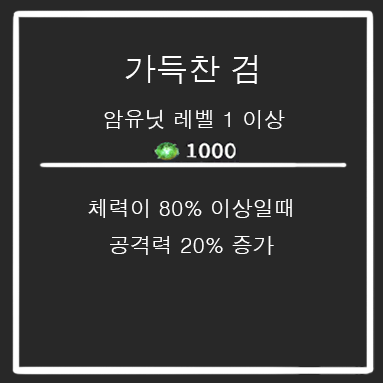
<style>
.page{position:relative;width:383px;height:383px;background:#282828}
.page>*{position:absolute;margin:0}
.t1{font:21.3px "Dotum";color:#ffffff}
.t2{font:32px "Dotum";color:#ffffff}
</style>
<div class="page">
<p class="t1" style="left:104px;top:55px;width:181px;height:75px;text-align:center"><span class="t2">가득찬 검<br></span>암유닛 레벨 1 이상</p>
<p class="t1" style="left:88px;top:199px;width:204px;height:56px;text-align:center">체력이 80% 이상일때<br>공격력 20% 증가</p>
</div>
